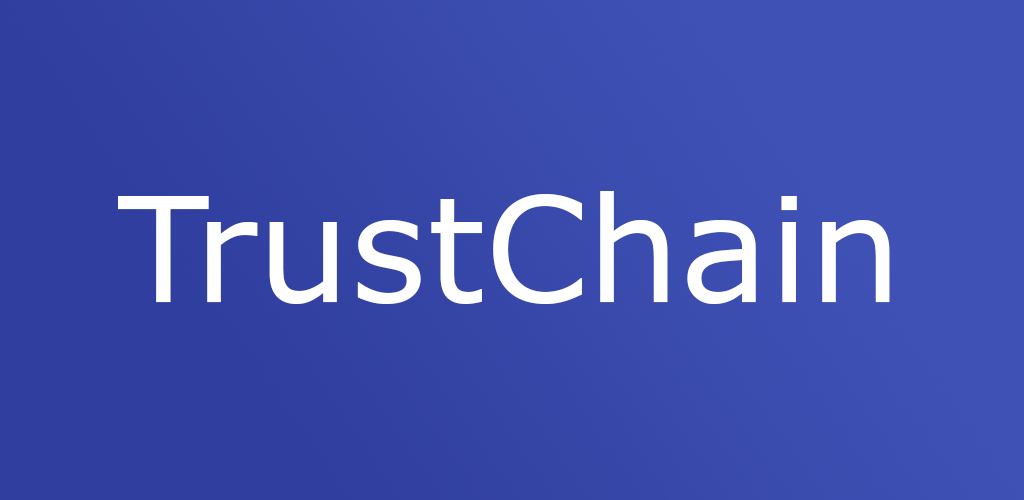
<style>
.page{position:relative;width:1024px;height:500px}
.page>*{position:absolute;margin:0}
.t1{font:146px "Verdana";color:#ffffff}
</style>
<div class="page">
<p class="t1" style="left:118px;top:191px;width:772px;height:113px">TrustChain</p>
</div>
